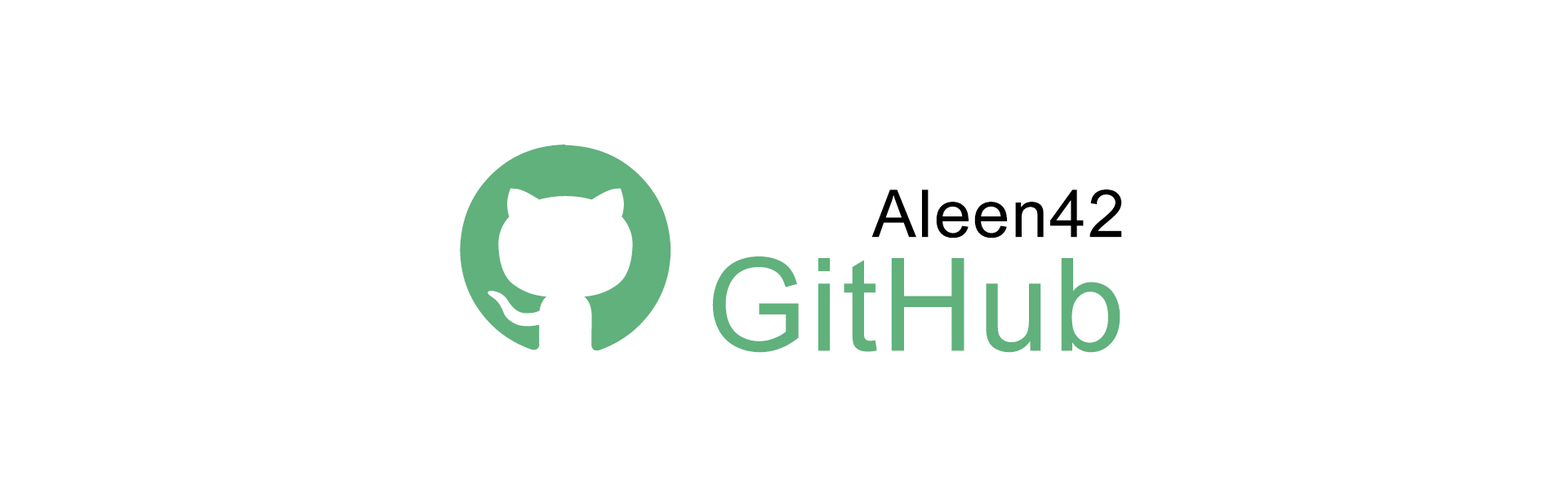
<style>
.page{position:relative;width:1568px;height:490px;background:#ffffff}
.page>*{position:absolute;margin:0}
.t1{font:65.9px "ArialMT";color:#000000;font-weight:bold}
.t2{font:129px "ArialMT";color:#60b17c;font-weight:bold}
</style>
<div class="page">
<p class="t1" style="left:871px;top:189px;width:251px;height:49px">Aleen42</p>
<p class="t2" style="left:712px;top:256px;width:408px;height:97px">GitHub</p>
</div>
